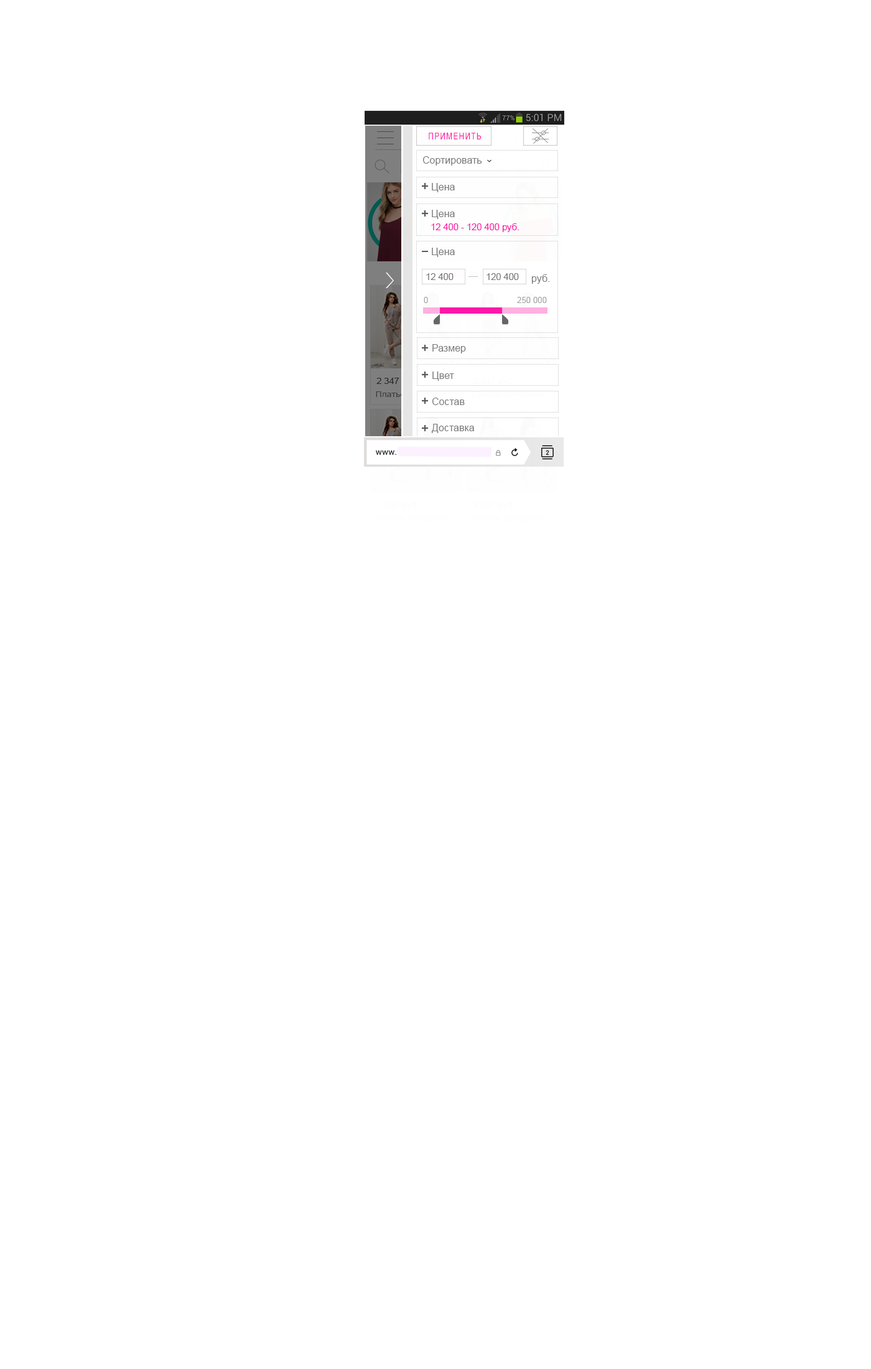
<style>
.page{position:relative;width:871px;height:1369px;background:#ffffff}
.page>*{position:absolute;margin:0}
.t1{font:9.3px "ArialMT";letter-spacing:0.1em;color:#fe18a8;scale:0.8 1}
.t2{font:10px "ArialMT";color:#7a7a7a}
.t3{font:9.1px "ArialMT";color:#fe18a8}
.t4{font:9.1px "ArialMT";color:#7a7a7a}
.t5{font:8.3px "ArialMT";color:#a5a5a5}
</style>
<div class="page">
<p class="t1" style="left:429px;top:133px;width:53px;height:6px">ПРИМЕНИТЬ</p>
<p class="t2" style="left:422px;top:156px;width:60px;height:10px">Сортировать</p>
<p class="t2" style="left:432px;top:183px;width:23px;height:9px">Цена</p>
<p class="t2" style="left:432px;top:210px;width:23px;height:9px">Цена</p>
<p class="t3" style="left:431px;top:223px;width:88px;height:9px">12 400 - 120 400 руб.</p>
<p class="t2" style="left:432px;top:248px;width:23px;height:9px">Цена</p>
<p class="t4" style="left:426px;top:273px;width:28px;height:7px">12 400</p>
<p class="t4" style="left:487px;top:273px;width:32px;height:7px">120 400</p>
<p class="t2" style="left:531px;top:274px;width:19px;height:10px">руб.</p>
<p class="t5" style="left:424px;top:297px;width:4px;height:6px">0</p>
<p class="t5" style="left:517px;top:297px;width:30px;height:6px">250 000</p>
<p class="t2" style="left:432px;top:344px;width:34px;height:9px">Размер</p>
<p class="t2" style="left:432px;top:371px;width:22px;height:10px">Цвет</p>
<p class="t2" style="left:432px;top:398px;width:33px;height:7px">Состав</p>
<p class="t2" style="left:431px;top:424px;width:43px;height:9px">Доставка</p>
</div>
